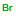
<style>
.page{position:relative;width:16px;height:16px;background:#ffffff}
.page>*{position:absolute;margin:0}
.t1{font:9.5px "Kalinga-Bold";color:#00a708}
</style>
<div class="page">
<p class="t1" style="left:2px;top:4px;width:11px;height:7px">Br</p>
</div>
